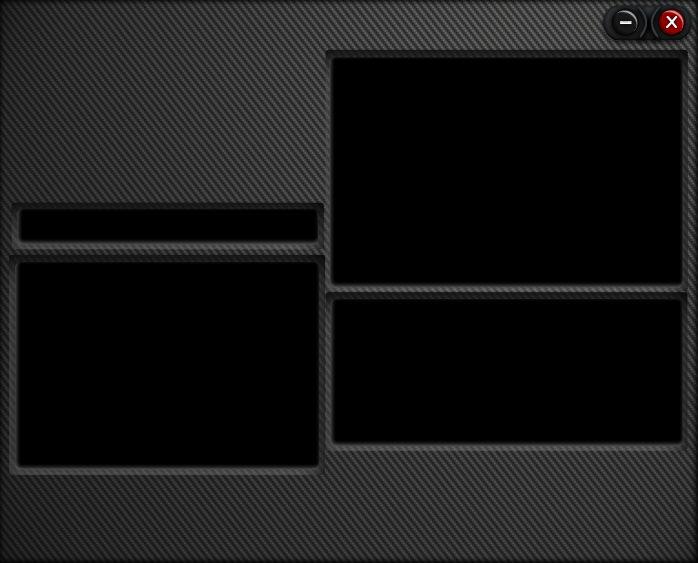
<style>
.page{position:relative;width:698px;height:563px;background:#000000}
.page>*{position:absolute;margin:0}
.t1{font:16px "ComicSansMS-Bold";color:#ffffff}
</style>
<div class="page">
<p class="t1" style="left:666px;top:16px;width:12px;height:12px">X</p>
</div>
